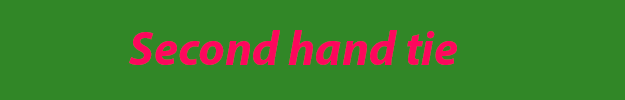
<style>
.page{position:relative;width:625px;height:100px;background:#318727}
.page>*{position:absolute;margin:0}
.t1{font:48px "MyriadPro-BoldIt";color:#fd075d}
</style>
<div class="page">
<p class="t1" style="left:129px;top:30px;width:328px;height:35px">Second hand tie</p>
</div>
